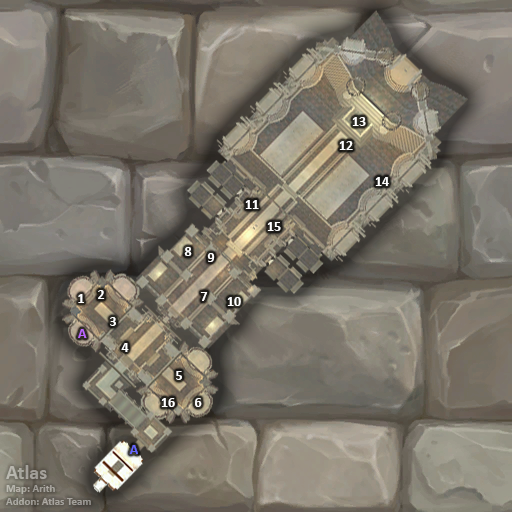
<style>
.page{position:relative;width:512px;height:512px}
.page>*{position:absolute;margin:0}
.t1{font:14px "Calibri-Bold";color:#ffffff}
.t2{font:14px "Calibri-Bold";color:#bb66ff}
.t3{font:14px "Calibri-Bold";color:#6666ff}
.t4{font:11px "Calibri-Bold";color:#a7a49d}
.t5{font:20px "Calibri-Bold";color:#a7a49d}
</style>
<div class="page">
<p class="t1" style="left:352px;top:117px;width:14px;height:9px">13</p>
<p class="t1" style="left:339px;top:141px;width:14px;height:9px">12</p>
<p class="t1" style="left:375px;top:177px;width:14px;height:9px">14</p>
<p class="t1" style="left:245px;top:200px;width:14px;height:9px">11</p>
<p class="t1" style="left:267px;top:222px;width:14px;height:9px">15</p>
<p class="t1" style="left:184px;top:247px;width:8px;height:9px">8</p>
<p class="t1" style="left:207px;top:253px;width:8px;height:9px">9</p>
<p class="t1" style="left:78px;top:294px;width:6px;height:9px">1</p>
<p class="t1" style="left:98px;top:290px;width:7px;height:9px">2</p>
<p class="t1" style="left:200px;top:292px;width:8px;height:9px">7</p>
<p class="t1" style="left:227px;top:297px;width:14px;height:9px">10</p>
<p class="t1" style="left:110px;top:317px;width:6px;height:9px">3</p>
<p class="t2" style="left:78px;top:329px;width:9px;height:9px">A</p>
<p class="t1" style="left:121px;top:343px;width:8px;height:9px">4</p>
<p class="t1" style="left:176px;top:371px;width:6px;height:9px">5</p>
<p class="t1" style="left:161px;top:398px;width:14px;height:9px">16</p>
<p class="t1" style="left:195px;top:398px;width:7px;height:9px">6</p>
<p class="t3" style="left:129px;top:445px;width:9px;height:9px">A</p>
<p class="t4" style="left:6px;top:465px;width:85px;height:40px"><span class="t5">Atlas<br></span>Map: Arith<br>Addon: Atlas Team</p>
</div>
